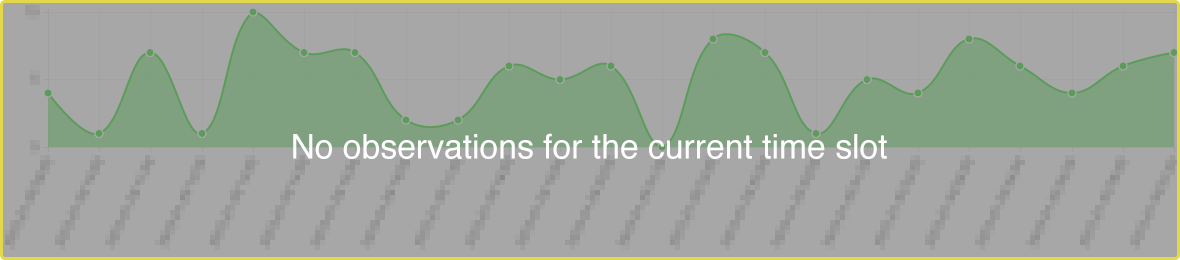
<style>
.page{position:relative;width:1180px;height:260px;background:#a7a7a7}
.page>*{position:absolute;margin:0}
.t1{font:34px "Helvetica";color:#ffffff}
</style>
<div class="page">
<p class="t1" style="left:293px;top:133px;width:594px;height:26px">No observations for the current time slot</p>
</div>
